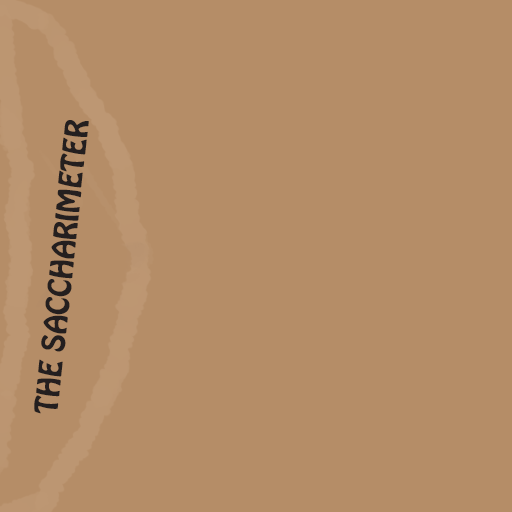
<style>
.page{position:relative;width:512px;height:512px;background:#b58d67}
.page>*{position:absolute;margin:0}
.t1{font:28.1px "HoboStd";color:#241f1f}
</style>
<div class="page">
<p class="t1" style="left:34px;top:120px;width:55px;height:294px;rotate:-84deg">THE SACCHARIMETER</p>
</div>
